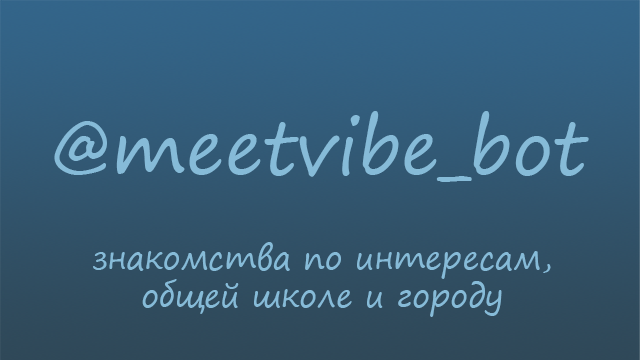
<style>
.page{position:relative;width:640px;height:360px}
.page>*{position:absolute;margin:0}
.t1{font:73.2px "SegoePrint";color:#86bbd8}
.t2{font:31.5px "SegoePrint";color:#86bbd8}
</style>
<div class="page">
<p class="t1" style="left:54px;top:111px;width:535px;height:71px">@meetvibe_bot</p>
<p class="t2" style="left:93px;top:242px;width:458px;height:75px;text-align:center">знакомства по интересам,<br>общей школе и городу</p>
</div>
